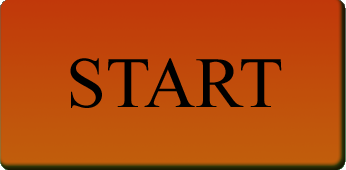
<style>
.page{position:relative;width:346px;height:170px}
.page>*{position:absolute;margin:0}
.t1{font:71.7px "TimesNewRomanPSMT";color:#000000}
</style>
<div class="page">
<p class="t1" style="left:70px;top:58px;width:212px;height:50px">START</p>
</div>
